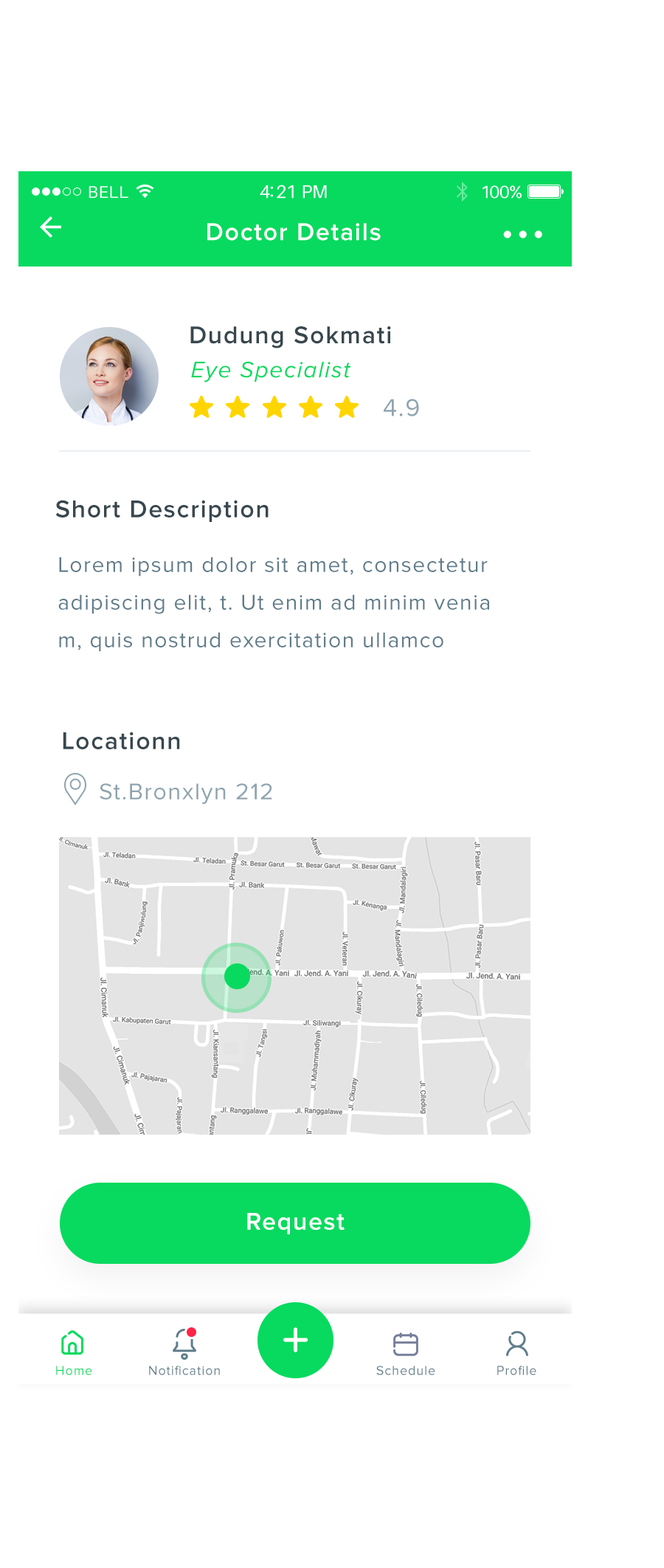
<style>
.page{position:relative;width:664px;height:1568px;background:#ffffff}
.page>*{position:absolute;margin:0}
.t1{font:25.1px "ProximaNova-Semibold";letter-spacing:0.05em;color:#ffffff}
.t2{font:52.4px "ProximaNova-Semibold";letter-spacing:0.05em;color:#ffffff}
.t3{font:25.1px "ProximaNova-Semibold";letter-spacing:0.05em;color:#37474e}
.t4{font:23.6px "ProximaNova-RegularIt";letter-spacing:0.05em;color:#07da5f}
.t5{font:25.1px "ProximaNova-Regular";letter-spacing:0.05em;color:#8fa4ae}
.t6{font:25.1px "ProximaNova-Semibold";letter-spacing:0.05em;color:#38474f}
.t7{font:22.1px/37.6px "ProximaNova-Regular";letter-spacing:0.05em;color:#607c8a}
.t8{font:23.6px "ProximaNova-Regular";letter-spacing:0.05em;color:#8fa4ae}
.t9{font:50.1px "Nunito-SemiBold";letter-spacing:0.05em;color:#ffffff}
.t10{font:13.3px "ProximaNova-Regular";letter-spacing:0.05em;color:#07da5f}
.t11{font:13.3px "ProximaNova-Regular";letter-spacing:0.05em;color:#607d8b}
</style>
<div class="page">
<p class="t1" style="left:207px;top:223px;width:174px;height:18px">Doctor Details</p>
<p class="t2" style="left:503px;top:230px;width:40px;height:8px">...</p>
<p class="t3" style="left:190px;top:326px;width:201px;height:22px">Dudung Sokmati</p>
<p class="t4" style="left:191px;top:361px;width:160px;height:21px">Eye Specialist</p>
<p class="t5" style="left:384px;top:399px;width:35px;height:17px">4.9</p>
<p class="t6" style="left:55px;top:500px;width:214px;height:22px">Short Description</p>
<p class="t7" style="left:58px;top:557px;width:431px;height:95px">Lorem ipsum dolor sit amet, consectetur<br>adipiscing elit, t. Ut enim ad minim venia<br>m, quis nostrud exercitation ullamco</p>
<p class="t6" style="left:63px;top:732px;width:117px;height:17px">Locationn</p>
<p class="t8" style="left:100px;top:783px;width:172px;height:21px">St.Bronxlyn 212</p>
<p class="t1" style="left:247px;top:1213px;width:98px;height:21px">Request</p>
<p class="t9" style="left:283px;top:1327px;width:26px;height:25px">+</p>
<p class="t10" style="left:56px;top:1366px;width:36px;height:9px">Home</p>
<p class="t11" style="left:149px;top:1366px;width:71px;height:9px">Notification</p>
<p class="t11" style="left:376px;top:1366px;width:60px;height:9px">Schedule</p>
<p class="t11" style="left:498px;top:1366px;width:39px;height:9px">Profile</p>
</div>
